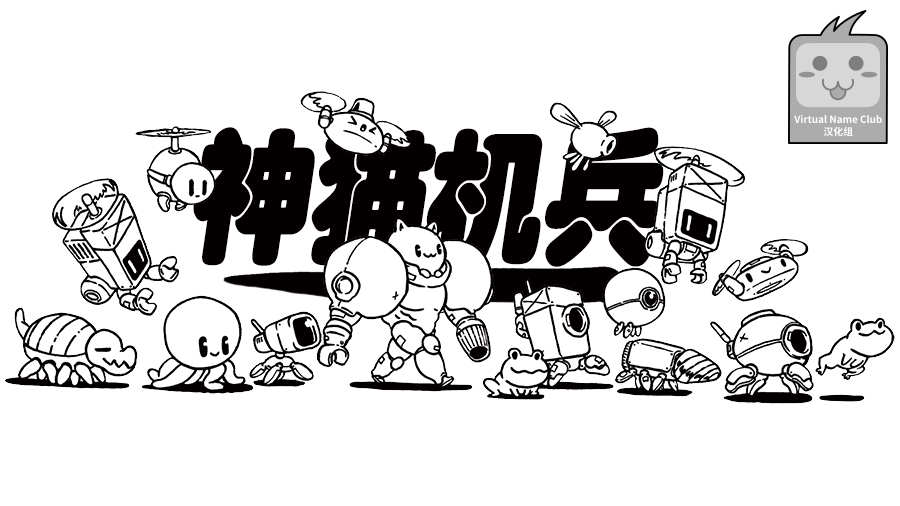
<style>
.page{position:relative;width:900px;height:506px;background:#ffffff}
.page>*{position:absolute;margin:0}
.t1{font:144.5px "STHupo";letter-spacing:-0.05em;color:#040001;font-weight:bold;font-style:italic;scale:0.83 1}
</style>
<div class="page">
<p class="t1" style="left:193px;top:127px;width:471px;height:140px">神猫机兵</p>
</div>
